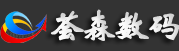
<style>
.page{position:relative;width:179px;height:51px;background:#333333}
.page>*{position:absolute;margin:0}
.t1{font:35px "STXinwei";letter-spacing:-0.1em;color:#ffffff;font-weight:bold}
</style>
<div class="page">
<p class="t1" style="left:50px;top:9px;width:130px;height:32px">荟森数码</p>
</div>
